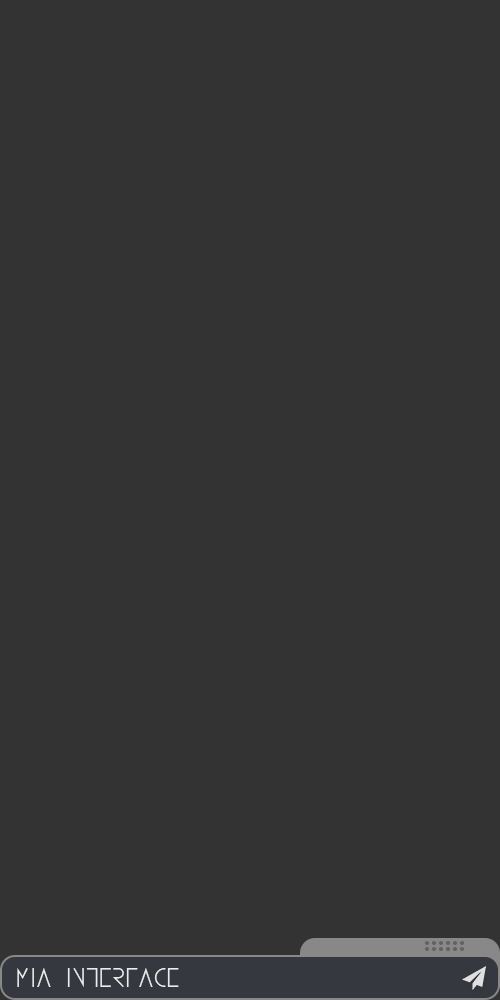
<style>
.page{position:relative;width:500px;height:1000px;background:#333333}
.page>*{position:absolute;margin:0}
.t1{font:25px "AVA";color:#ececec}
</style>
<div class="page">
<p class="t1" style="left:17px;top:968px;width:162px;height:19px">Mia Interface</p>
</div>
